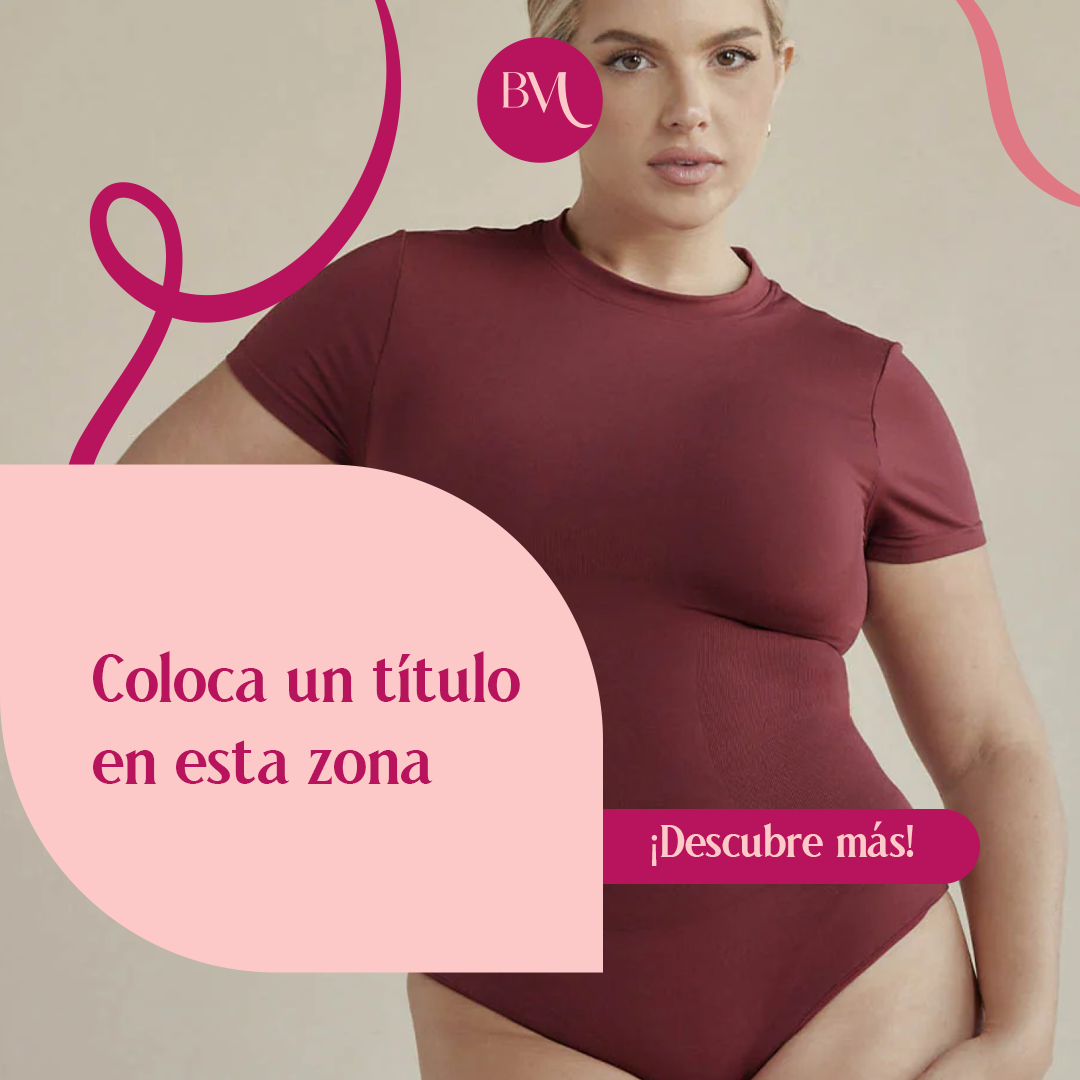
<style>
.page{position:relative;width:1080px;height:1080px;background:#fcc8c8}
.page>*{position:absolute;margin:0}
.t1{font:68px "alinia-Regular";color:#b8135d}
.t2{font:45px "alinia-Regular";color:#fdc9c9}
.t3{font:45px "MyriadPro-Regular";color:#fdc9c9}
</style>
<div class="page">
<p class="t1" style="left:93px;top:651px;width:427px;height:133px">Coloca un título<br>en esta zona</p>
<p class="t2" style="left:651px;top:821px;width:263px;height:45px"><span class="t3">¡</span>Descubre más!</p>
</div>
